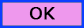
<style>
.page{position:relative;width:84px;height:28px;background:#ee98ed}
.page>*{position:absolute;margin:0}
.t1{font:17px "Verdana";color:#000000;font-weight:bold}
</style>
<div class="page">
<p class="t1" style="left:29px;top:7px;width:26px;height:13px">OK</p>
</div>
